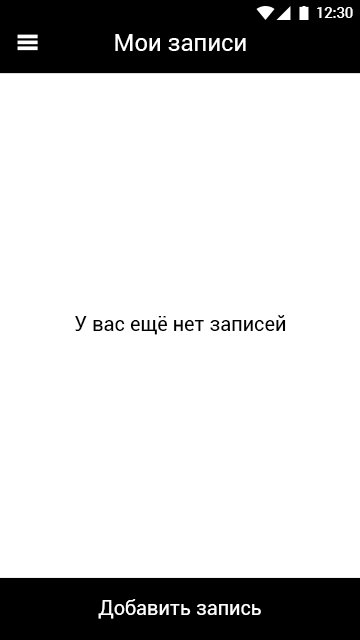
<style>
.page{position:relative;width:360px;height:640px;background:#ffffff}
.page>*{position:absolute;margin:0}
.t1{font:14.7px "Roboto-Medium";color:#ffffff}
.t2{font:24px "Roboto-Regular";color:#ffffff}
.t3{font:20px "Roboto-Regular";color:#000000}
.t4{font:20px "Roboto-Regular";color:#ffffff}
</style>
<div class="page">
<p class="t1" style="left:317px;top:7px;width:36px;height:11px">12:30</p>
<p class="t2" style="left:115px;top:34px;width:131px;height:17px">Мои записи</p>
<p class="t3" style="left:75px;top:315px;width:211px;height:20px">У вас ещё нет записей</p>
<p class="t4" style="left:98px;top:599px;width:163px;height:20px">Добавить запись</p>
</div>
